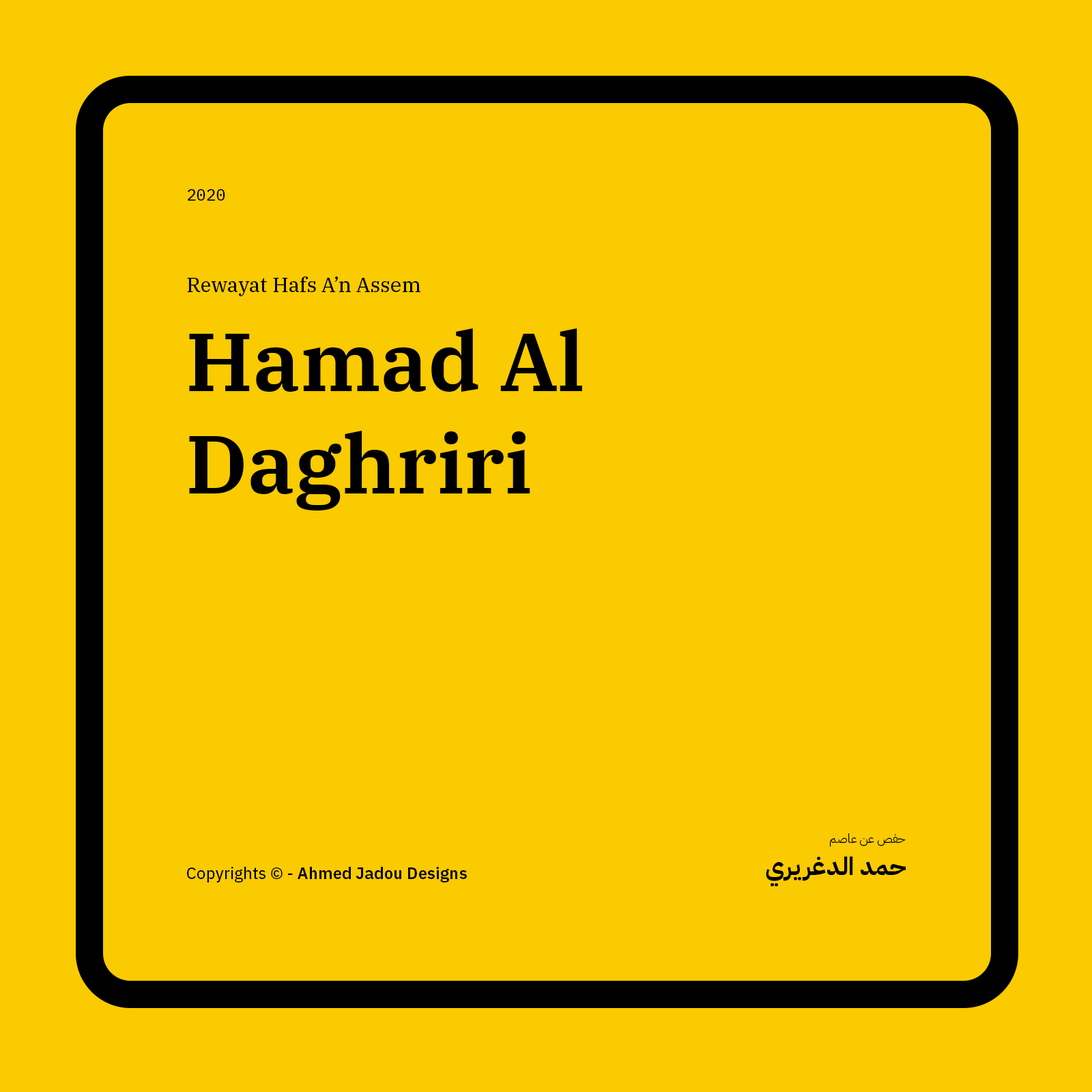
<style>
.page{position:relative;width:1092px;height:1092px;background:#facb00}
.page>*{position:absolute;margin:0}
.t1{font:16.4px "IBMPlexMono-Text";color:#000000}
.t2{font:20.5px "IBMPlexSerif-Text";color:#000000}
.t3{font:81.9px/102.7px "IBMPlexSerif-SemiBold";color:#000000}
.t4{font:12.3px "IBMPlexArabic-Light";color:#000000}
.t5{font:24.6px "IBMPlexArabic-Bold";color:#000000}
.t6{font:16.4px "IBMPlexSans-SemiBold";color:#000000}
.t7{font:16.4px "IBMPlexSans-Text";color:#000000}
</style>
<div class="page">
<p class="t1" style="left:188px;top:189px;width:37px;height:12px">2020</p>
<p class="t2" style="left:187px;top:276px;width:233px;height:20px">Rewayat Hafs A’n Assem</p>
<p class="t3" style="left:189px;top:328px;width:393px;height:183px">Hamad Al Daghriri</p>
<p class="t4" style="left:830px;top:833px;width:76px;height:14px">حفص عن عاصم</p>
<p class="t5" style="left:766px;top:857px;width:140px;height:30px">حمد الدغريري</p>
<p class="t6" style="left:187px;top:867px;width:280px;height:15px"><span class="t7">Copyrights © - </span>Ahmed Jadou Designs</p>
</div>
